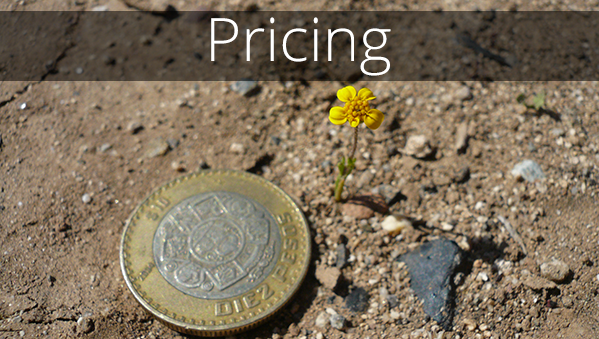
<style>
.page{position:relative;width:599px;height:339px}
.page>*{position:absolute;margin:0}
.t1{font:60px "OpenSans-Light";color:#ffffff;scale:1.03 1}
</style>
<div class="page">
<p class="t1" style="left:211px;top:17px;width:180px;height:59px">Pricing</p>
</div>
